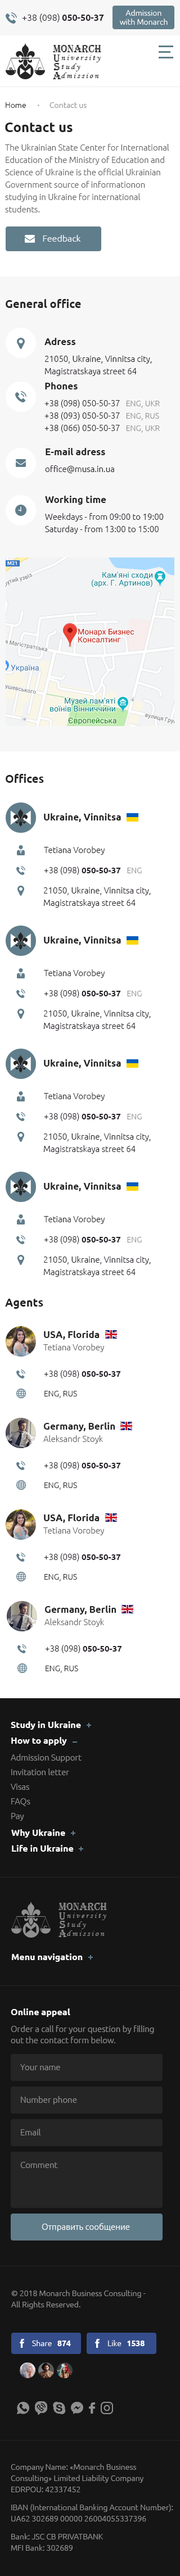
<style>
.page{position:relative;width:180px;height:2576px;background:#ffffff}
.page>*{position:absolute;margin:0}
.t1{font:9px "Ubuntu-Light";color:#262028}
.t2{font:9px "Ubuntu-Bold";color:#262028}
.t3{font:7.9px/9px "Ubuntu-Light";color:#ffffff}
.t4{font:10.4px "Algerian";color:#252525}
.t5{font:8.4px "MonotypeCorsiva";letter-spacing:0.19em;color:#252525}
.t6{font:7.9px "Ubuntu-Light";color:#909090}
.t7{font:7.9px "Ubuntu-Light";color:#202020}
.t8{font:13.5px "Ubuntu-Bold";color:#252525}
.t9{font:8.4px/12.4px "Ubuntu-Light";color:#606060}
.t10{font:9px "Ubuntu-Light";color:#ffffff}
.t11{font:11.2px "Ubuntu-Bold";color:#252525}
.t12{font:8.4px/16.9px "Ubuntu-Light";color:#262028}
.t13{font:9.6px/11.2px "Ubuntu-Bold";color:#252525}
.t14{font:8.4px/12.4px "Ubuntu-Light";color:#262028}
.t15{font:8.4px/16.9px "Ubuntu-Light";color:#252525}
.t16{font:7.9px/16.9px "Ubuntu-Light";color:#909090}
.t17{font:8.4px/12.4px "Ubuntu-Light";color:#252525}
.t18{font:7.9px/12.4px "Ubuntu-Light";color:#909090}
.t19{font:9.6px "Ubuntu-Bold";color:#252525}
.t20{font:8.4px "Ubuntu-Light";color:#252525}
.t21{font:8.4px "Ubuntu-Light";color:#262028}
.t22{font:8.4px "Ubuntu-Bold";color:#262028}
.t23{font:9.6px/12.4px "Ubuntu-Bold";color:#252525}
.t24{font:7.9px "Ubuntu-Light";color:#252525}
.t25{font:9px "Ubuntu-Bold";color:#ffffff}
.t26{font:8.4px/14.6px "Ubuntu-Light";color:#909090}
.t27{font:9px/11.2px "Ubuntu-Bold";color:#ffffff}
.t28{font:8.4px/16.9px "Ubuntu-Light";color:#909090}
.t29{font:8.4px/11.2px "Ubuntu-Light";color:#909090}
.t30{font:8.4px "Ubuntu-Light";color:#909090}
.t31{font:8.4px "Ubuntu-Light";color:#ffffff}
.t32{font:7.9px/11.2px "Ubuntu-Light";color:#909090}
.t33{font:7.9px "Ubuntu-Light";color:#ffffff}
.t34{font:7.9px "Ubuntu-Bold";color:#ffffff}
</style>
<div class="page">
<p class="t1" style="left:22px;top:13px;width:82px;height:9px">+38 (098) <span class="t2">050-50-37</span></p>
<p class="t3" style="left:120px;top:10px;width:47px;height:15px;text-align:center">Admission <br>with Monarch</p>
<p class="t4" style="left:53px;top:45px;width:48px;height:8px">MONARCH</p>
<p class="t4" style="left:53px;top:63px;width:7px;height:7px">S</p>
<p class="t4" style="left:53px;top:55px;width:7px;height:7px">U</p>
<p class="t5" style="left:61px;top:64px;width:19px;height:7px">tudy</p>
<p class="t5" style="left:61px;top:55px;width:40px;height:7px">niversity</p>
<p class="t4" style="left:53px;top:72px;width:8px;height:7px">A</p>
<p class="t5" style="left:61px;top:72px;width:38px;height:6px">dmission</p>
<p class="t6" style="left:6px;top:102px;width:81px;height:6px"><span class="t7">Home             </span>Contact us</p>
<p class="t8" style="left:5px;top:123px;width:67px;height:9px">Contact us</p>
<p class="t9" style="left:5px;top:144px;width:164px;height:68px">The Ukrainian State Center for International Education of the Ministry of Education and Science of Ukraine is the official Ukrainian <br>Government source of informationon studying in Ukraine for international students.</p>
<p class="t10" style="left:43px;top:235px;width:38px;height:7px">Feedback</p>
<p class="t11" style="left:6px;top:299px;width:75px;height:9px">General office</p>
<p class="t12" style="left:44px;top:338px;width:108px;height:38px"><span class="t13">Adress<br></span>21050, Ukraine, Vinnitsa city, <br><span class="t14">Magistratskaya street 64</span></p>
<p class="t15" style="left:44px;top:382px;width:116px;height:51px"><span class="t13">Phones<br></span>+38 (098) 050-50-37   <span class="t16">ENG, UKR<br></span><span class="t17">+38 (093) 050-50-37   </span><span class="t18">ENG, RUS<br></span><span class="t17">+38 (066) 050-50-37   </span><span class="t18">ENG, UKR</span></p>
<p class="t12" style="left:45px;top:448px;width:69px;height:25px"><span class="t13">E-mail adress<br></span>office@musa.in.ua</p>
<p class="t12" style="left:45px;top:496px;width:119px;height:38px"><span class="t13">Working time<br></span>Weekdays - from 09:00 to 19:00<br><span class="t14">Saturday - from 13:00 to 15:00</span></p>
<p class="t11" style="left:6px;top:774px;width:38px;height:9px">Offices</p>
<p class="t19" style="left:44px;top:813px;width:77px;height:9px">Ukraine, Vinnitsa</p>
<p class="t20" style="left:44px;top:846px;width:61px;height:9px">Tetiana Vorobey</p>
<p class="t21" style="left:44px;top:867px;width:98px;height:8px">+38 (098) <span class="t22">050-50-37   </span><span class="t6">ENG</span></p>
<p class="t14" style="left:43px;top:887px;width:108px;height:21px">21050, Ukraine, Vinnitsa city, <br>Magistratskaya street 64</p>
<p class="t19" style="left:44px;top:936px;width:77px;height:9px">Ukraine, Vinnitsa</p>
<p class="t20" style="left:44px;top:969px;width:61px;height:9px">Tetiana Vorobey</p>
<p class="t21" style="left:44px;top:990px;width:98px;height:8px">+38 (098) <span class="t22">050-50-37   </span><span class="t6">ENG</span></p>
<p class="t14" style="left:43px;top:1010px;width:108px;height:21px">21050, Ukraine, Vinnitsa city, <br>Magistratskaya street 64</p>
<p class="t19" style="left:44px;top:1059px;width:77px;height:9px">Ukraine, Vinnitsa</p>
<p class="t20" style="left:44px;top:1092px;width:61px;height:9px">Tetiana Vorobey</p>
<p class="t21" style="left:44px;top:1113px;width:98px;height:8px">+38 (098) <span class="t22">050-50-37   </span><span class="t6">ENG</span></p>
<p class="t14" style="left:43px;top:1133px;width:108px;height:21px">21050, Ukraine, Vinnitsa city, <br>Magistratskaya street 64</p>
<p class="t19" style="left:44px;top:1182px;width:77px;height:9px">Ukraine, Vinnitsa</p>
<p class="t20" style="left:44px;top:1216px;width:61px;height:8px">Tetiana Vorobey</p>
<p class="t21" style="left:44px;top:1236px;width:98px;height:8px">+38 (098) <span class="t22">050-50-37   </span><span class="t6">ENG</span></p>
<p class="t14" style="left:43px;top:1256px;width:108px;height:21px">21050, Ukraine, Vinnitsa city, <br>Magistratskaya street 64</p>
<p class="t11" style="left:5px;top:1299px;width:38px;height:10px">Agents</p>
<p class="t9" style="left:43px;top:1331px;width:62px;height:21px"><span class="t23">USA, Florida<br></span>Tetiana Vorobey</p>
<p class="t21" style="left:44px;top:1370px;width:77px;height:8px">+38 (098) <span class="t22">050-50-37</span></p>
<p class="t24" style="left:44px;top:1391px;width:33px;height:7px">ENG, RUS</p>
<p class="t23" style="left:43px;top:1422px;width:72px;height:22px">Germany, Berlin<br><span class="t9">Aleksandr Stoyk</span></p>
<p class="t21" style="left:44px;top:1462px;width:77px;height:8px">+38 (098) <span class="t22">050-50-37</span></p>
<p class="t24" style="left:44px;top:1482px;width:33px;height:8px">ENG, RUS</p>
<p class="t9" style="left:43px;top:1514px;width:62px;height:21px"><span class="t23">USA, Florida<br></span>Tetiana Vorobey</p>
<p class="t21" style="left:44px;top:1553px;width:77px;height:9px">+38 (098) <span class="t22">050-50-37</span></p>
<p class="t24" style="left:44px;top:1574px;width:33px;height:7px">ENG, RUS</p>
<p class="t23" style="left:44px;top:1606px;width:72px;height:21px">Germany, Berlin<br><span class="t9">Aleksandr Stoyk</span></p>
<p class="t21" style="left:45px;top:1645px;width:77px;height:8px">+38 (098) <span class="t22">050-50-37</span></p>
<p class="t24" style="left:46px;top:1666px;width:32px;height:7px">ENG, RUS</p>
<p class="t25" style="left:11px;top:1721px;width:70px;height:9px">Study in Ukraine</p>
<p class="t26" style="left:11px;top:1737px;width:70px;height:84px"><span class="t27">How to apply<br></span><span class="t28">Admission Support<br></span>Invitation letter<br>Visas<br>FAQs<br>Pay</p>
<p class="t25" style="left:11px;top:1829px;width:54px;height:9px">Why Ukraine</p>
<p class="t25" style="left:12px;top:1845px;width:62px;height:7px">Life in Ukraine</p>
<p class="t25" style="left:12px;top:1953px;width:71px;height:9px">Menu navigation</p>
<p class="t28" style="left:11px;top:2008px;width:143px;height:35px"><span class="t27">Online appeal<br></span>Order a call for your question by filling <br><span class="t29">out the contact form below.</span></p>
<p class="t30" style="left:20px;top:2064px;width:40px;height:6px">Your name</p>
<p class="t30" style="left:21px;top:2096px;width:56px;height:9px">Number phone</p>
<p class="t30" style="left:21px;top:2129px;width:19px;height:6px">Email</p>
<p class="t30" style="left:20px;top:2162px;width:38px;height:6px">Comment</p>
<p class="t31" style="left:42px;top:2223px;width:88px;height:9px">Отправить сообщение</p>
<p class="t32" style="left:11px;top:2290px;width:135px;height:19px">© 2018 Monarch Business Consulting - <br>All Rights Reserved.</p>
<p class="t33" style="left:32px;top:2340px;width:39px;height:6px">Share   <span class="t34">874</span></p>
<p class="t33" style="left:108px;top:2340px;width:36px;height:6px">Like   <span class="t34">1538</span></p>
<p class="t32" style="left:11px;top:2464px;width:132px;height:28px">Company Name: «Monarch Business <br>Consulting» Limited Liability Company <br>EDRPOU: 42337452</p>
<p class="t32" style="left:11px;top:2504px;width:162px;height:17px">IBAN (International Banking Account Number): <br>UA62 302689 00000 26004055337396</p>
<p class="t32" style="left:11px;top:2533px;width:92px;height:18px">Bank: JSC CB PRIVATBANK<br>MFI Bank: 302689</p>
</div>
